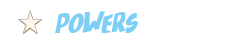
<style>
.page{position:relative;width:250px;height:45px;background:#ffffff}
.page>*{position:absolute;margin:0}
.t1{font:30px "HoustonComicsPersonalUse";color:#7ecef6}
</style>
<div class="page">
<p class="t1" style="left:55px;top:11px;width:83px;height:23px">POWERS</p>
</div>
